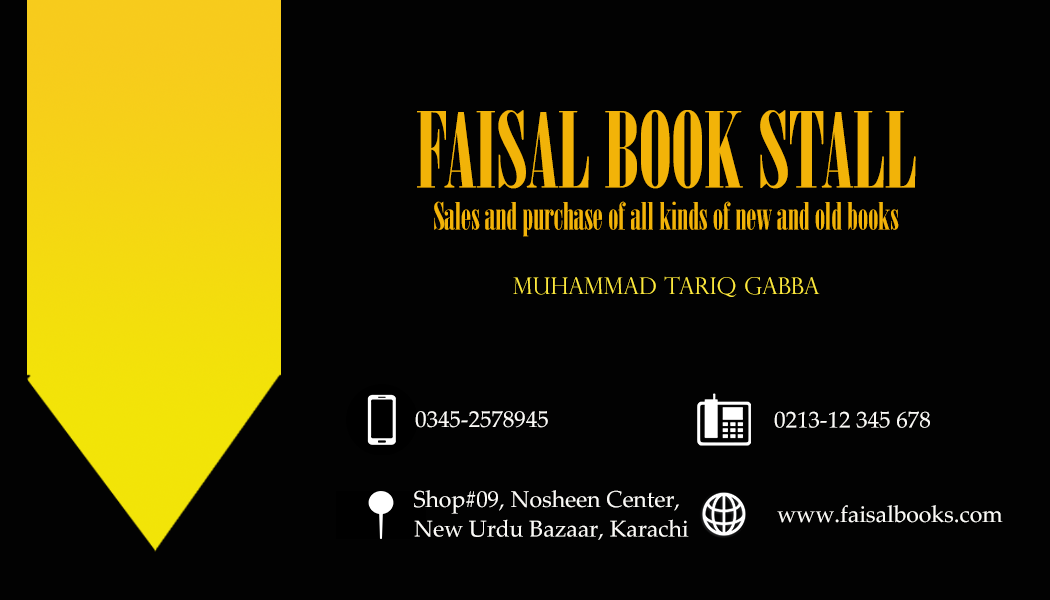
<style>
.page{position:relative;width:1050px;height:600px;background:#020202}
.page>*{position:absolute;margin:0}
.t1{font:104.2px "Onyx";color:#f2b308}
.t2{font:37.5px "Onyx";color:#f2b308}
.t3{font:22.9px "PerpetuaTitlingMT-Light";color:#fce83d}
.t4{font:22.9px "PalatinoLinotype-Roman";color:#fbfaf7}
</style>
<div class="page">
<p class="t1" style="left:417px;top:110px;width:499px;height:79px">FAISAL BOOK STALL</p>
<p class="t2" style="left:434px;top:201px;width:465px;height:36px">Sales and purchase of all kinds of new and old books</p>
<p class="t3" style="left:513px;top:276px;width:307px;height:21px">MUHAMMAD TARIQ GABBA</p>
<p class="t4" style="left:415px;top:411px;width:133px;height:17px">0345-2578945</p>
<p class="t4" style="left:774px;top:411px;width:156px;height:17px">0213-12 345 678</p>
<p class="t4" style="left:414px;top:490px;width:265px;height:24px">Shop#09, Nosheen Center,</p>
<p class="t4" style="left:777px;top:505px;width:226px;height:18px">www.faisalbooks.com</p>
<p class="t4" style="left:414px;top:519px;width:275px;height:21px">New Urdu Bazaar, Karachi</p>
</div>
